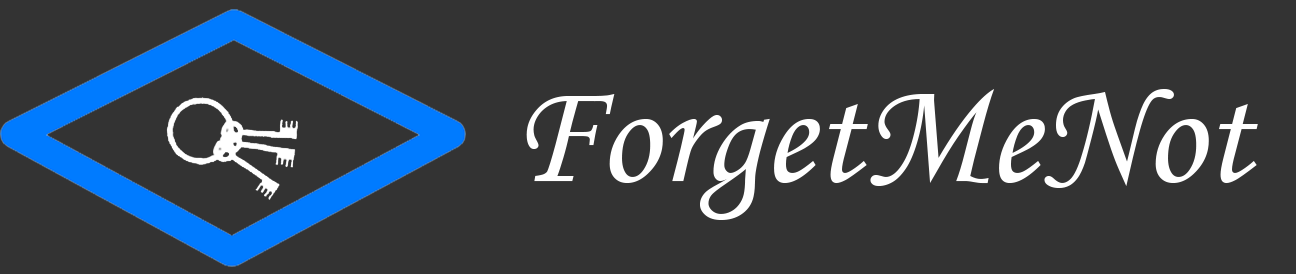
<style>
.page{position:relative;width:1296px;height:274px;background:#333333}
.page>*{position:absolute;margin:0}
.t1{font:150px "MonotypeCorsiva";color:#ffffff}
</style>
<div class="page">
<p class="t1" style="left:526px;top:89px;width:732px;height:131px">ForgetMeNot</p>
</div>
